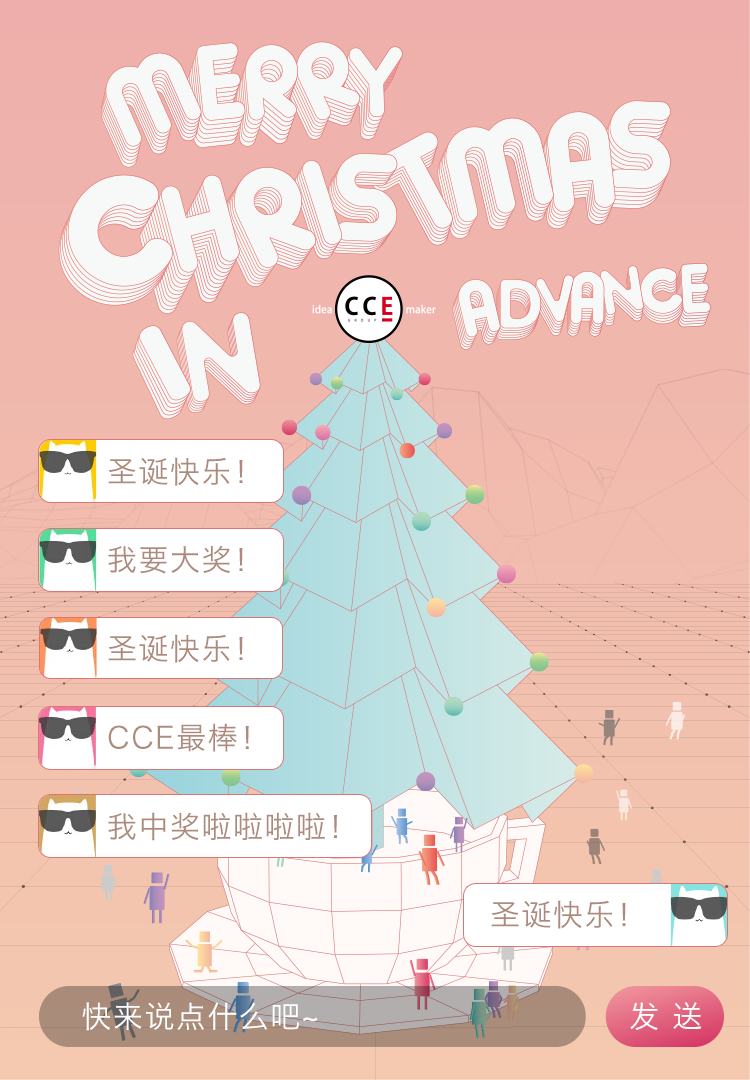
<style>
.page{position:relative;width:750px;height:1080px}
.page>*{position:absolute;margin:0}
.t1{font:30.3px "HiraginoSansGB-W3";letter-spacing:0.05em;color:#ac8b7c}
.t2{font:30.3px "HiraginoSansGB-W3";letter-spacing:0.05em;color:#ffffff}
</style>
<div class="page">
<p class="t1" style="left:108px;top:457px;width:135px;height:29px">圣诞快乐！</p>
<p class="t1" style="left:108px;top:545px;width:135px;height:29px">我要大奖！</p>
<p class="t1" style="left:108px;top:634px;width:135px;height:29px">圣诞快乐！</p>
<p class="t1" style="left:108px;top:723px;width:141px;height:29px">CCE最棒！</p>
<p class="t1" style="left:108px;top:812px;width:229px;height:29px">我中奖啦啦啦啦！</p>
<p class="t1" style="left:491px;top:900px;width:135px;height:29px">圣诞快乐！</p>
<p class="t2" style="left:82px;top:1002px;width:236px;height:29px">快来说点什么吧~</p>
</div>
